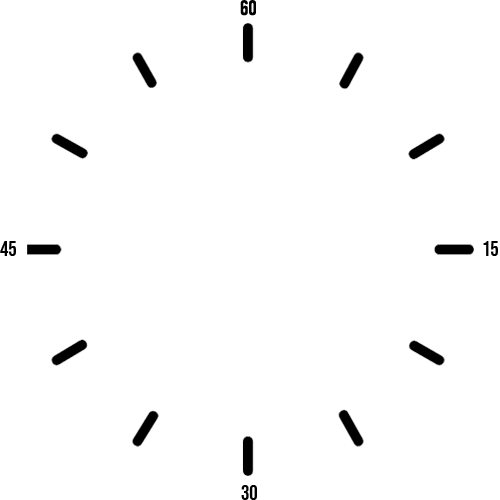
<style>
.page{position:relative;width:500px;height:500px;background:#ffffff}
.page>*{position:absolute;margin:0}
.t1{font:20.8px "BebasNeue-Regular";color:#000000}
</style>
<div class="page">
<p class="t1" style="left:240px;top:0px;width:16px;height:16px">60</p>
<p class="t1" style="left:0px;top:241px;width:16px;height:15px">45</p>
<p class="t1" style="left:483px;top:241px;width:15px;height:15px">15</p>
<p class="t1" style="left:241px;top:485px;width:16px;height:15px">30</p>
</div>
